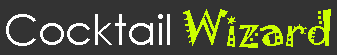
<style>
.page{position:relative;width:337px;height:55px;background:#333333}
.page>*{position:absolute;margin:0}
.t1{font:41.7px "CenturyGothic";color:#ffffff}
.t2{font:41.7px "Jokerman-Regular";color:#ccff00}
</style>
<div class="page">
<p class="t1" style="left:6px;top:14px;width:164px;height:32px">Cocktail</p>
<p class="t2" style="left:183px;top:9px;width:148px;height:39px">Wizard</p>
</div>
